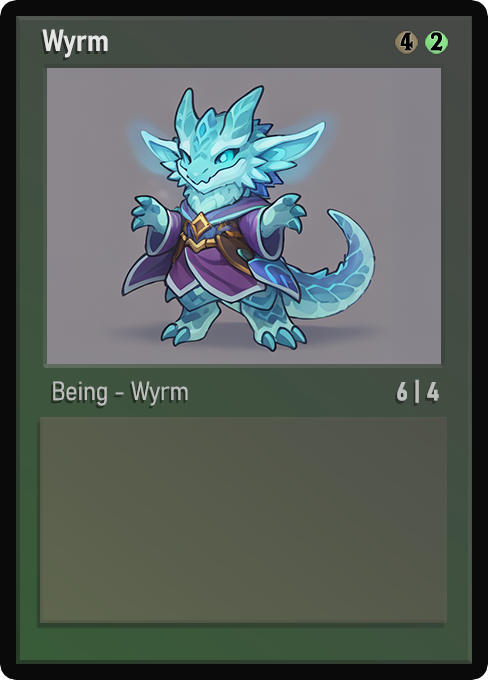
<style>
.page{position:relative;width:488px;height:680px}
.page>*{position:absolute;margin:0}
.t1{font:30px "Bahnschrift-SemiBoldSemiCondensed";color:#f2f2f2;font-weight:bold}
.t2{font:25px "WTRRoycroft";color:#000000;font-weight:bold;scale:1.09 1}
.t3{font:26px "Bahnschrift-LightSemiCondensed";color:#c8c8c8;font-weight:bold}
.t4{font:26px "Bahnschrift-BoldSemiCondensed";color:#bdbfbd;font-weight:bold}
</style>
<div class="page">
<p class="t1" style="left:42px;top:29px;width:66px;height:29px;opacity:0.9">Wyrm</p>
<p class="t2" style="left:400px;top:32px;width:13px;height:19px">4</p>
<p class="t2" style="left:430px;top:32px;width:13px;height:19px">2</p>
<p class="t3" style="left:53px;top:381px;width:135px;height:25px;opacity:0.9">Being - Wyrm</p>
<p class="t4" style="left:397px;top:379px;width:42px;height:24px">6 | 4</p>
</div>
